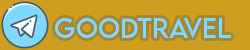
<style>
.page{position:relative;width:250px;height:50px;background:#ce9e20}
.page>*{position:absolute;margin:0}
.t1{font:25px "LEMONMILK-Regular";color:#80d8ff}
</style>
<div class="page">
<p class="t1" style="left:55px;top:17px;width:176px;height:21px">goodTravel</p>
</div>
